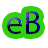
<style>
.page{position:relative;width:48px;height:48px;background:#ffffff}
.page>*{position:absolute;margin:0}
.t1{font:34.2px "MyriadPro-Regular"}
</style>
<div class="page">
<p class="t1" style="left:7px;top:11px;width:33px;height:23px">eB</p>
</div>
